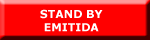
<style>
.page{position:relative;width:150px;height:40px;background:#ff0000}
.page>*{position:absolute;margin:0}
.t1{font:11px "Verdana-Bold";color:#ffffff}
</style>
<div class="page">
<p class="t1" style="left:40px;top:9px;width:63px;height:23px">STAND BY<br> EMITIDA</p>
</div>
